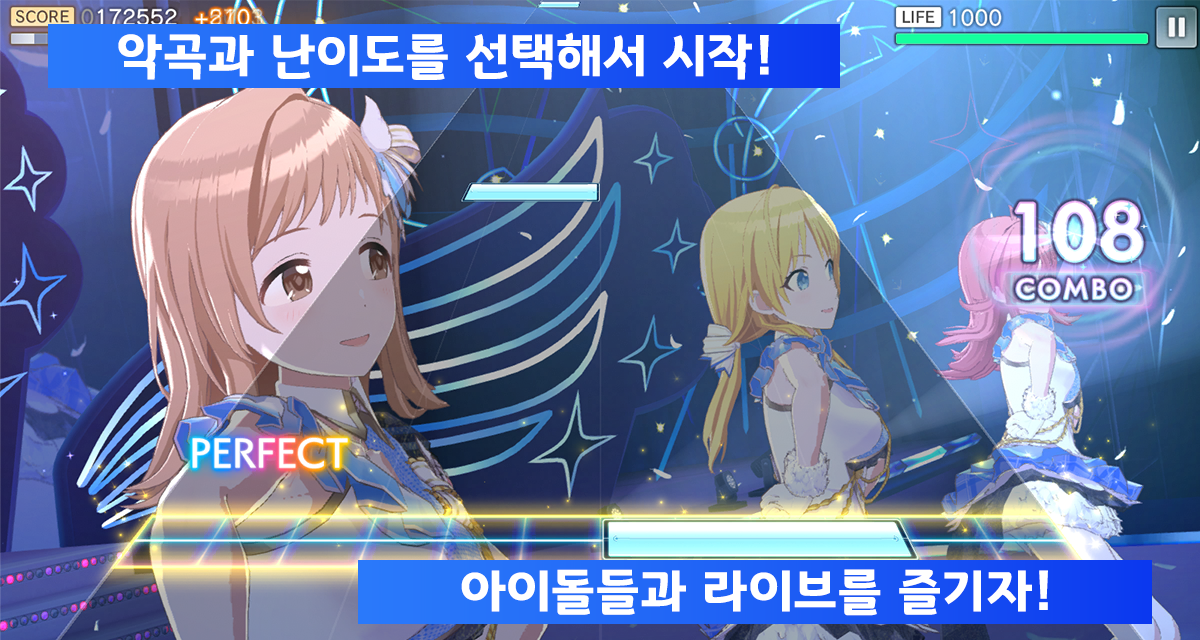
<style>
.page{position:relative;width:1200px;height:640px}
.page>*{position:absolute;margin:0}
.t1{font:50.7px "GyeonggiTitleB";letter-spacing:0.03em;color:#ffffff}
</style>
<div class="page">
<p class="t1" style="left:118px;top:32px;width:651px;height:48px">악곡과 난이도를 선택해서 시작!</p>
<p class="t1" style="left:461px;top:569px;width:587px;height:47px">아이돌들과 라이브를 즐기자!</p>
</div>
